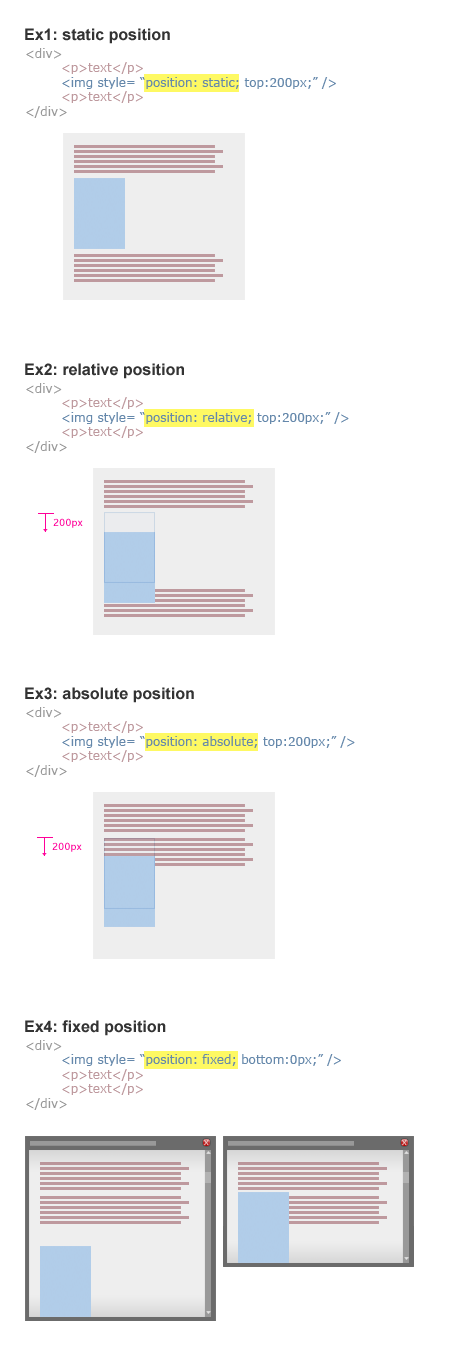
<style>
.page{position:relative;width:450px;height:1350px;background:#ffffff}
.page>*{position:absolute;margin:0}
.t1{font:16px "Arial-BoldMT";color:#333333}
.t2{font:12px "Verdana";color:#6588ab}
.t3{font:12px "Verdana";color:#999999}
.t4{font:12px "Verdana";color:#be999e}
.t5{font:10px "MuseoSans-500";color:#ff0099}
</style>
<div class="page">
<p class="t1" style="left:25px;top:28px;width:145px;height:16px">Ex1: static position</p>
<p class="t2" style="left:26px;top:48px;width:310px;height:70px"><span class="t3">&lt;div&gt;<br> </span><span class="t4">&lt;p&gt;text&lt;/p&gt;<br></span> &lt;img style= “position: static; top:200px;” /&gt;<br><span class="t4"> &lt;p&gt;text&lt;/p&gt;<br></span><span class="t3">&lt;/div&gt;</span></p>
<p class="t1" style="left:25px;top:363px;width:159px;height:16px">Ex2: relative position</p>
<p class="t2" style="left:26px;top:383px;width:323px;height:70px"><span class="t3">&lt;div&gt;<br> </span><span class="t4">&lt;p&gt;text&lt;/p&gt;<br></span> &lt;img style= “position: relative; top:200px;” /&gt;<br><span class="t4"> &lt;p&gt;text&lt;/p&gt;<br></span><span class="t3">&lt;/div&gt;</span></p>
<p class="t5" style="left:53px;top:518px;width:30px;height:10px">200px</p>
<p class="t1" style="left:25px;top:687px;width:169px;height:16px">Ex3: absolute position</p>
<p class="t2" style="left:26px;top:707px;width:329px;height:70px"><span class="t3">&lt;div&gt;<br> </span><span class="t4">&lt;p&gt;text&lt;/p&gt;<br></span> &lt;img style= “position: absolute; top:200px;” /&gt;<br><span class="t4"> &lt;p&gt;text&lt;/p&gt;<br></span><span class="t3">&lt;/div&gt;</span></p>
<p class="t5" style="left:52px;top:842px;width:30px;height:10px">200px</p>
<p class="t1" style="left:25px;top:1020px;width:141px;height:16px">Ex4: fixed position</p>
<p class="t2" style="left:26px;top:1040px;width:315px;height:70px"><span class="t3">&lt;div&gt;<br> </span>&lt;img style= “position: fixed; bottom:0px;” /&gt;<br><span class="t4"> &lt;p&gt;text&lt;/p&gt;<br> &lt;p&gt;text&lt;/p&gt;<br></span><span class="t3">&lt;/div&gt;</span></p>
</div>
